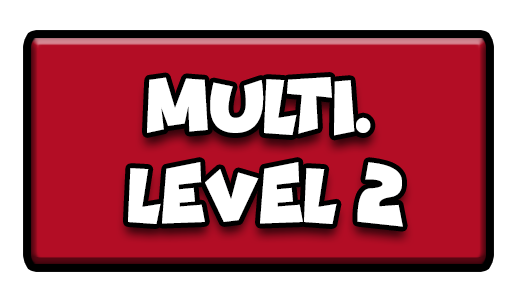
<style>
.page{position:relative;width:517px;height:301px;background:#ffffff}
.page>*{position:absolute;margin:0}
.t1{font:77.7px "Funhouse";color:#ffffff;scale:0.95 1}
</style>
<div class="page">
<p class="t1" style="left:147px;top:77px;width:224px;height:59px">MULTI.</p>
<p class="t1" style="left:128px;top:162px;width:275px;height:65px">LEVEL 2</p>
</div>
